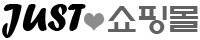
<style>
.page{position:relative;width:200px;height:40px;background:#ffffff}
.page>*{position:absolute;margin:0}
.t1{font:39.9px "ForteMT";letter-spacing:-0.005em;color:#000000}
.t2{font:32.9px "ExpoM-HM";letter-spacing:-0.05em;color:#626262}
</style>
<div class="page">
<p class="t1" style="left:2px;top:4px;width:84px;height:34px">JUST</p>
<p class="t2" style="left:108px;top:6px;width:90px;height:28px">쇼핑몰</p>
</div>
